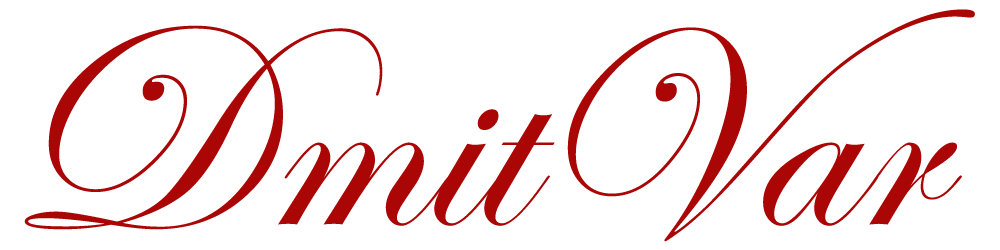
<style>
.page{position:relative;width:1000px;height:250px;background:#ffffff}
.page>*{position:absolute;margin:0}
.t1{font:300px "EdwardianScriptITC";color:#ab0707}
</style>
<div class="page">
<p class="t1" style="left:24px;top:9px;width:951px;height:233px">DmitVar</p>
</div>
